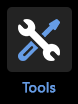
<style>
.page{position:relative;width:78px;height:104px;background:#000000}
.page>*{position:absolute;margin:0}
.t1{font:14px "SegoeUI";color:#669ce5;font-weight:bold}
</style>
<div class="page">
<p class="t1" style="left:22px;top:82px;width:34px;height:11px">Tools</p>
</div>
